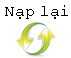
<style>
.page{position:relative;width:71px;height:58px;background:#ffffff}
.page>*{position:absolute;margin:0}
.t1{font:12px "CourierNewPSMT";color:#000000}
</style>
<div class="page">
<p class="t1" style="left:5px;top:5px;width:63px;height:14px">Nạp lại</p>
</div>
